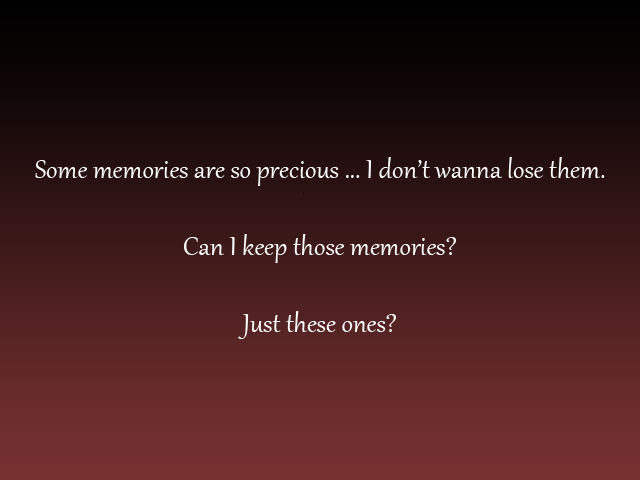
<style>
.page{position:relative;width:640px;height:480px}
.page>*{position:absolute;margin:0}
.t1{font:32px "Gabriola";color:#ffffff}
.t2{font:37.3px "Gabriola";color:#ffffff}
</style>
<div class="page">
<p class="t1" style="left:35px;top:157px;width:570px;height:182px;text-align:center"><span class="t2"><br></span><br><br><br>Some memories are so precious ... I don’t wanna lose them.<br><br>Can I keep those memories?<br><br>Just these ones?</p>
</div>
